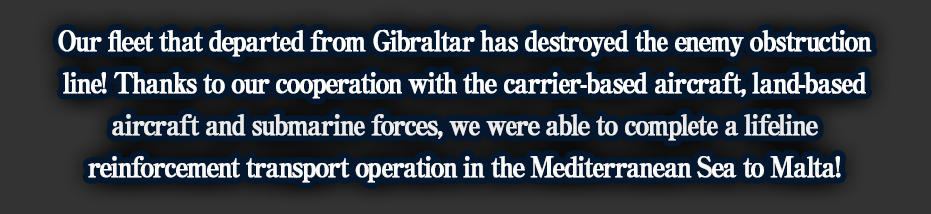
<style>
.page{position:relative;width:931px;height:214px;background:#03172f}
.page>*{position:absolute;margin:0}
.t1{font:28px/42px "RyuminPro-ExBold";letter-spacing:-0.08em;color:#ffffff;font-weight:bold;scale:0.9 1}
</style>
<div class="page">
<p class="t1" style="left:58px;top:29px;width:814px;height:154px;text-align:center">Our fleet that departed from Gibraltar has destroyed the enemy obstruction<br>line! Thanks to our cooperation with the carrier-based aircraft, land-based<br>aircraft and submarine forces, we were able to complete a lifeline<br>reinforcement transport operation in the Mediterranean Sea to Malta!</p>
</div>
